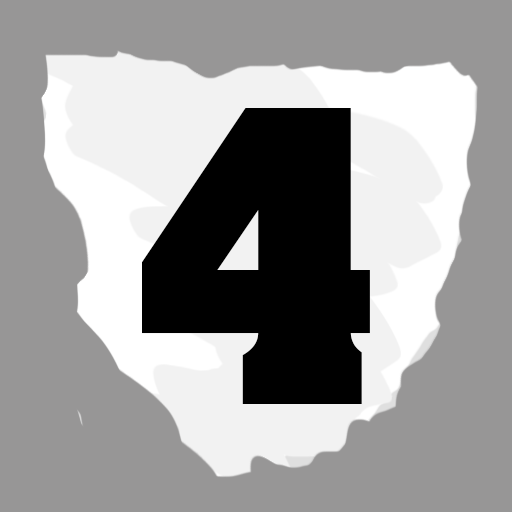
<style>
.page{position:relative;width:512px;height:512px;background:#979696}
.page>*{position:absolute;margin:0}
.t1{font:453.9px "VNI-Auchon-Bold";letter-spacing:-0.015em;color:#000000}
</style>
<div class="page">
<p class="t1" style="left:142px;top:108px;width:228px;height:296px">4</p>
</div>
